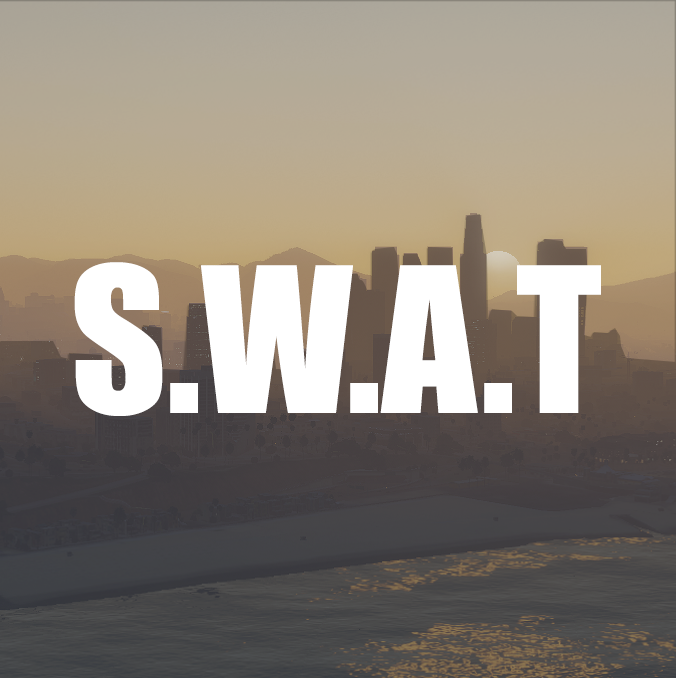
<style>
.page{position:relative;width:676px;height:678px}
.page>*{position:absolute;margin:0}
.t1{font:186.7px "Impact";color:#ffffff}
</style>
<div class="page">
<p class="t1" style="left:74px;top:262px;width:527px;height:154px">S.W.A.T</p>
</div>
